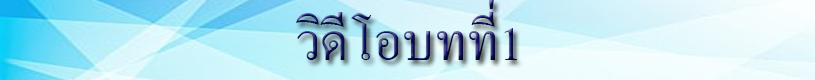
<style>
.page{position:relative;width:815px;height:80px}
.page>*{position:absolute;margin:0}
.t1{font:72px "AngsanaNew"}
</style>
<div class="page">
<p class="t1" style="left:296px;top:0px;width:221px;height:60px">วิดีโอบทที่1</p>
</div>
